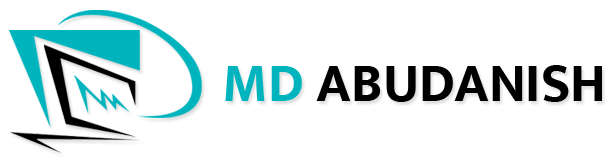
<style>
.page{position:relative;width:610px;height:163px;background:#ffffff}
.page>*{position:absolute;margin:0}
.t1{font:55px "Mukta-Bold";color:#000000}
.t2{font:55px "Mukta-Bold";color:#00b4bd}
</style>
<div class="page">
<p class="t1" style="left:225px;top:65px;width:377px;height:37px"><span class="t2">MD</span> ABUDANISH</p>
</div>
